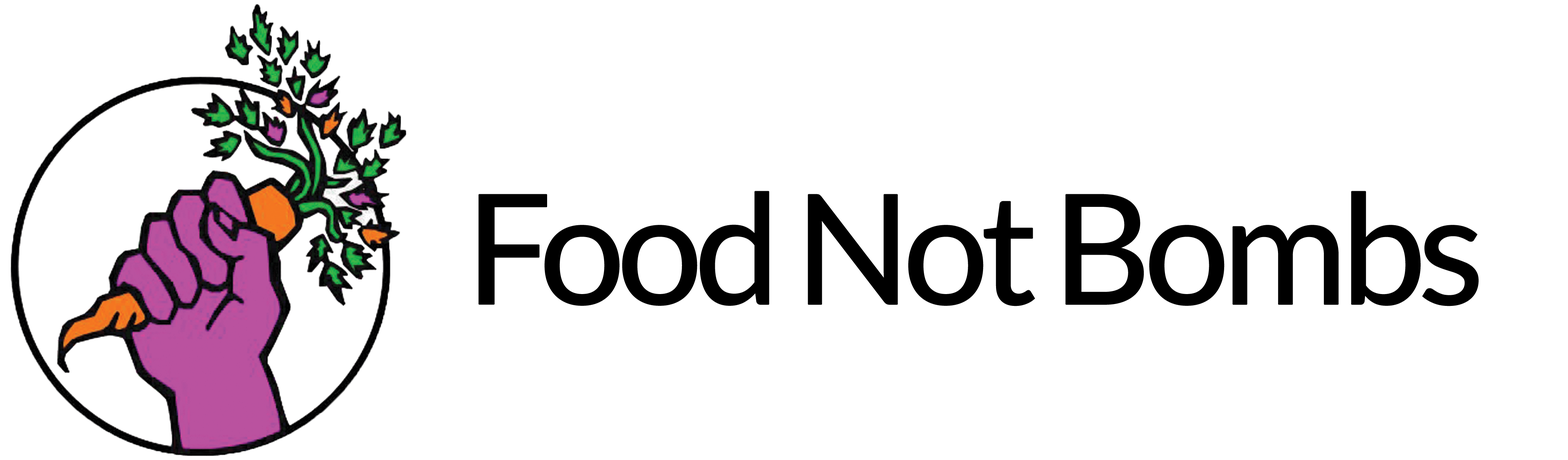
<style>
.page{position:relative;width:1568px;height:460px;background:#ffffff}
.page>*{position:absolute;margin:0}
.t1{font:152.8px "Lato-Regular";letter-spacing:-0.075em;color:#000000;font-weight:bold}
</style>
<div class="page">
<p class="t1" style="left:478px;top:191px;width:1001px;height:115px">Food Not Bombs</p>
</div>
